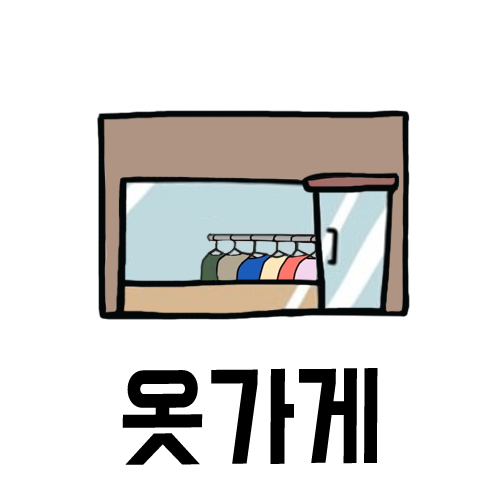
<style>
.page{position:relative;width:500px;height:500px;background:#ffffff}
.page>*{position:absolute;margin:0}
.t1{font:100.1px "BMDoHyeon";color:#000000;scale:0.92 1}
</style>
<div class="page">
<p class="t1" style="left:122px;top:368px;width:256px;height:97px">옷가게</p>
</div>
